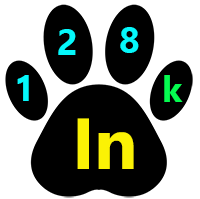
<style>
.page{position:relative;width:200px;height:199px;background:#000000}
.page>*{position:absolute;margin:0}
.t1{font:36px "NirmalaUI-Bold";color:#05f8fb}
.t2{font:36px "NirmalaUI-Bold";color:#05fb50}
.t3{font:72px "NirmalaUI-Bold";color:#fbf205}
</style>
<div class="page">
<p class="t1" style="left:58px;top:29px;width:18px;height:26px">2</p>
<p class="t1" style="left:120px;top:27px;width:19px;height:26px">8</p>
<p class="t1" style="left:17px;top:75px;width:12px;height:26px">1</p>
<p class="t2" style="left:164px;top:75px;width:19px;height:27px">k</p>
<p class="t3" style="left:77px;top:118px;width:57px;height:51px">In</p>
</div>
